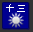
<style>
.page{position:relative;width:33px;height:32px;background:#000090}
.page>*{position:absolute;margin:0}
.t1{font:10.4px "SimSun";color:#ffffff}
</style>
<div class="page">
<p class="t1" style="left:6px;top:4px;width:19px;height:8px">十三</p>
</div>
